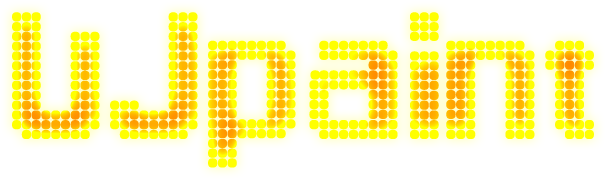
<style>
.page{position:relative;width:606px;height:179px;background:#ffffff}
.page>*{position:absolute;margin:0}
.t1{font:158.3px "SamsTown"}
</style>
<div class="page">
<p class="t1" style="left:12px;top:12px;width:582px;height:156px">VJpaint</p>
</div>
